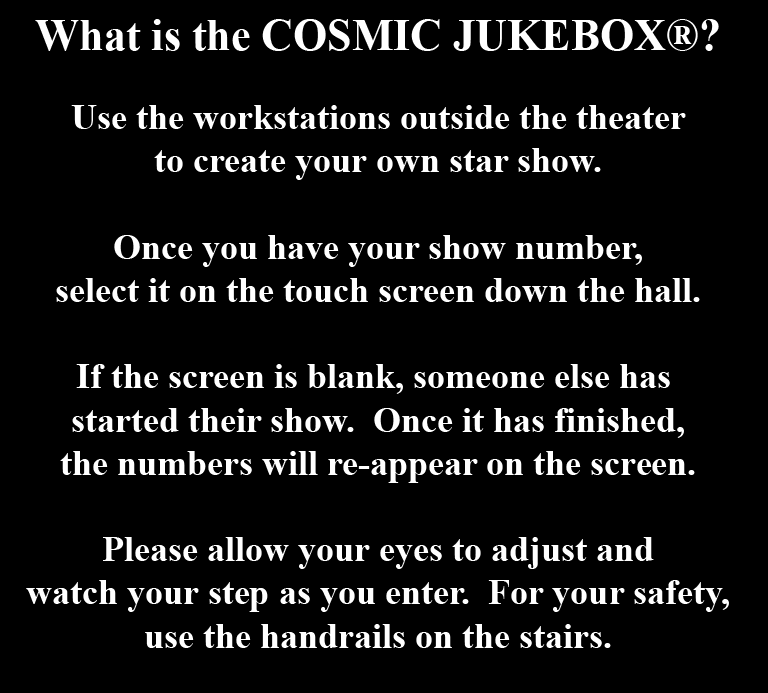
<style>
.page{position:relative;width:768px;height:693px;background:#000000}
.page>*{position:absolute;margin:0}
.t1{font:36px "TimesNewRomanPS-BoldMT";color:#ffffff}
.t2{font:44px "TimesNewRomanPS-BoldMT";color:#ffffff}
</style>
<div class="page">
<p class="t1" style="left:26px;top:19px;width:703px;height:629px;text-align:center"><span class="t2">What is the COSMIC JUKEBOX®?<br><br></span>Use the workstations outside the theater<br>to create your own star show.<br><br>Once you have your show number,<br>select it on the touch screen down the hall.<br><br>If the screen is blank, someone else has <br>started their show.  Once it has finished,<br>the numbers will re-appear on the screen.<br><br>Please allow your eyes to adjust and<br>watch your step as you enter.  For your safety,<br>use the handrails on the stairs.</p>
</div>
